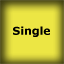
<style>
.page{position:relative;width:64px;height:64px;background:#ece644}
.page>*{position:absolute;margin:0}
.t1{font:10.8px "Verdana-Bold";color:#000000}
</style>
<div class="page">
<p class="t1" style="left:13px;top:26px;width:37px;height:11px">Single</p>
</div>
